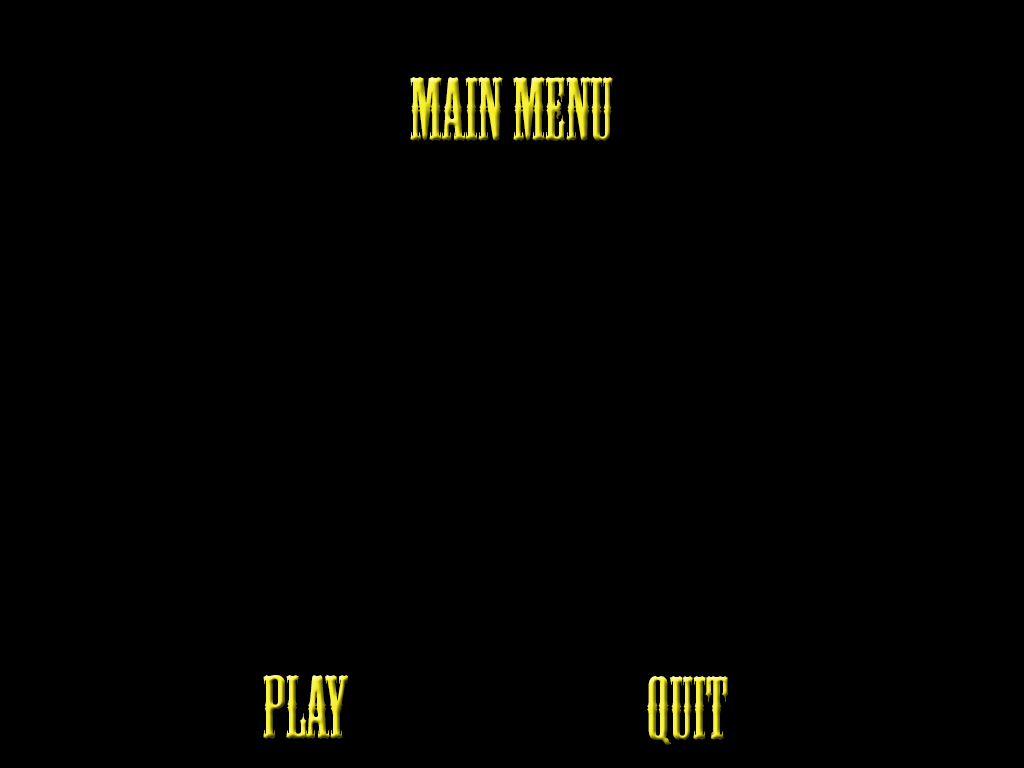
<style>
.page{position:relative;width:1024px;height:768px;background:#000000}
.page>*{position:absolute;margin:0}
.t1{font:83.3px "MesquiteStd"}
</style>
<div class="page">
<p class="t1" style="left:410px;top:77px;width:203px;height:64px">Main Menu</p>
<p class="t1" style="left:263px;top:675px;width:85px;height:64px">Play</p>
<p class="t1" style="left:647px;top:676px;width:82px;height:69px">Quit</p>
</div>
